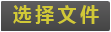
<style>
.page{position:relative;width:111px;height:32px}
.page>*{position:absolute;margin:0}
.t1{font:18.7px "MicrosoftYaHei";letter-spacing:0.2em;color:#d1c837}
</style>
<div class="page">
<p class="t1" style="left:13px;top:5px;width:86px;height:19px">选择文件</p>
</div>
